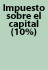
<style>
.page{position:relative;width:48px;height:70px;background:#b6d3bd}
.page>*{position:absolute;margin:0}
.t1{font:10px/8px "MyriadPro-Bold";color:#000000}
</style>
<div class="page">
<p class="t1" style="left:3px;top:4px;width:42px;height:33px;text-align:center">Impuesto<br>sobre el<br>capital<br>(10%)</p>
</div>
